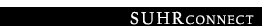
<style>
.page{position:relative;width:262px;height:26px;background:#000000}
.page>*{position:absolute;margin:0}
.t1{font:18px "CalifornianFB-Reg";letter-spacing:0.1em;color:#ffffff;font-variant:small-caps}
</style>
<div class="page">
<p class="t1" style="left:130px;top:11px;width:124px;height:14px">SUHRconnect</p>
</div>
